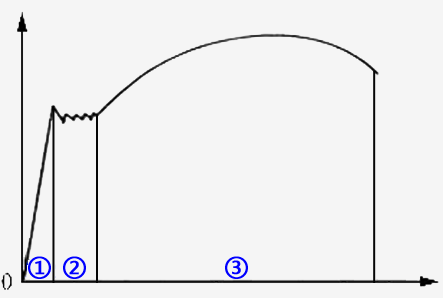
<style>
.page{position:relative;width:443px;height:298px;background:#f5f5f5}
.page>*{position:absolute;margin:0}
.t1{font:24px "MicrosoftYaHei";letter-spacing:0.075em;color:#0000ff;font-weight:bold}
</style>
<div class="page">
<p class="t1" style="left:28px;top:256px;width:23px;height:23px">①</p>
<p class="t1" style="left:63px;top:256px;width:23px;height:23px">②</p>
<p class="t1" style="left:225px;top:256px;width:23px;height:23px">③</p>
</div>
